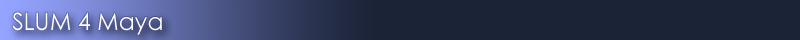
<style>
.page{position:relative;width:800px;height:40px;background:#1b2337}
.page>*{position:absolute;margin:0}
.t1{font:24px "CenturyGothic";color:#ffffff}
</style>
<div class="page">
<p class="t1" style="left:12px;top:12px;width:150px;height:23px">SLUM 4 Maya</p>
</div>
